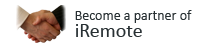
<style>
.page{position:relative;width:198px;height:50px;background:#ffffff}
.page>*{position:absolute;margin:0}
.t1{font:14px/17px "Calibri";color:#283033}
.t2{font:20px/17px "Calibri";color:#283033}
</style>
<div class="page">
<p class="t1" style="left:75px;top:10px;width:117px;height:27px">Become a partner of<br><span class="t2">iRemote</span></p>
</div>
